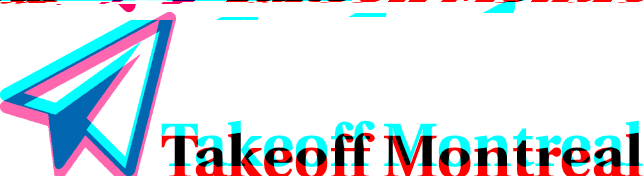
<style>
.page{position:relative;width:643px;height:176px;background:#ffffff}
.page>*{position:absolute;margin:0}
.t1{font:61px "Heuristica-Bold"}
</style>
<div class="page">
<p class="t1" style="left:161px;top:120px;width:482px;height:47px">Takeoff Montreal</p>
</div>
